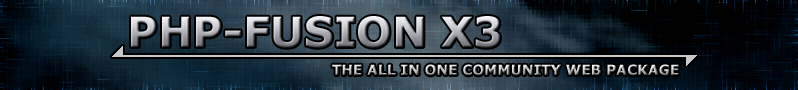
<style>
.page{position:relative;width:798px;height:90px}
.page>*{position:absolute;margin:0}
.t1{font:41.7px "Verdana-Bold"}
.t2{font:13.9px "Verdana-Bold"}
</style>
<div class="page">
<p class="t1" style="left:131px;top:16px;width:369px;height:32px">PHP-FUSION X3</p>
<p class="t2" style="left:332px;top:64px;width:347px;height:12px">THE ALL IN ONE COMMUNITY WEB PACKAGE</p>
</div>
